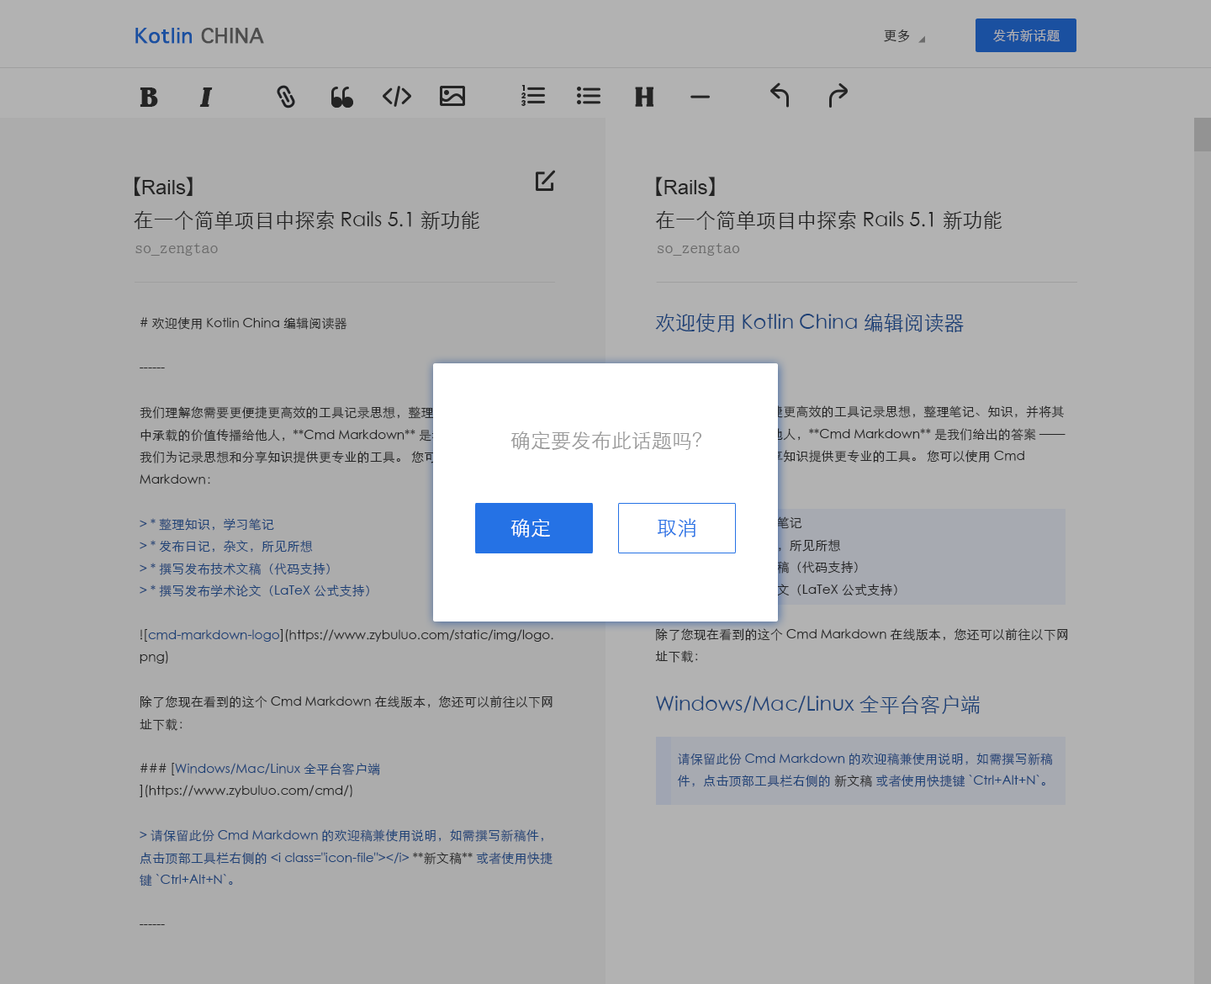
<style>
.page{position:relative;width:1211px;height:984px;background:#b2b2b2}
.page>*{position:absolute;margin:0}
.t1{font:20.2px "Geneva";font-weight:bold}
.t2{font:13.5px "STXihei";color:#333333}
.t3{font:13.5px "STXihei";color:#b2b2b2}
.t4{font:28.6px "BelweBT-Bold";color:#333333}
.t5{font:28.6px "BelweBT-Bold";color:#333333;font-style:italic}
.t6{font:7.6px "ITCAvantGardeStd-Bold";color:#333333}
.t7{font:20.2px "ArialMT";color:#333333}
.t8{font:20.2px "AdobeHeitiStd-Regular";color:#333333}
.t9{font:20.2px "STXihei";color:#333333}
.t10{font:16.8px "SimSun";color:#6b6b6b}
.t11{font:16.8px "STXihei";color:#6b6b6b}
.t12{font:12.7px "STXihei"}
.t13{font:20.2px "STXihei"}
.t14{font:20.2px "STXihei";color:#999999}
.t15{font:20.2px "STXihei";color:#ffffff}
.t16{font:20.2px "STXihei";color:#2572e5}
</style>
<div class="page">
<p class="t1" style="left:135px;top:28px;width:129px;height:16px">Kotlin CHINA</p>
<p class="t2" style="left:884px;top:29px;width:26px;height:13px">更多</p>
<p class="t3" style="left:994px;top:29px;width:67px;height:13px">发布新话题</p>
<p class="t4" style="left:140px;top:87px;width:18px;height:20px">B</p>
<p class="t5" style="left:199px;top:87px;width:14px;height:20px">I</p>
<p class="t6" style="left:522px;top:85px;width:3px;height:6px">1</p>
<p class="t6" style="left:522px;top:93px;width:4px;height:5px">2</p>
<p class="t6" style="left:522px;top:100px;width:4px;height:6px">3</p>
<p class="t7" style="left:135px;top:177px;width:58px;height:19px"><span class="t8">【</span>Rails<span class="t8">】</span></p>
<p class="t7" style="left:656px;top:177px;width:59px;height:19px"><span class="t8">【</span>Rails<span class="t8">】</span></p>
<p class="t9" style="left:134px;top:210px;width:346px;height:21px">在一个简单项目中探索 Rails 5.1 新功能</p>
<p class="t9" style="left:655px;top:210px;width:348px;height:21px">在一个简单项目中探索 Rails 5.1 新功能</p>
<p class="t10" style="left:135px;top:243px;width:83px;height:13px"><span class="t11"> </span>so_zengtao</p>
<p class="t10" style="left:658px;top:243px;width:82px;height:13px"><span class="t11"> </span>so_zengtao</p>
<p class="t12" style="left:140px;top:317px;width:414px;height:608px"># 欢迎使用 Kotlin China 编辑阅读器<br><br>------<br><br>我们理解您需要更便捷更高效的工具记录思想，整理笔记、知识，并将其中承载的价值传播给他人，**Cmd Markdown** 是我们给出的答案 —— 我们为记录思想和分享知识提供更专业的工具。 您可以使用 Cmd Markdown：<br><br>&gt; * 整理知识，学习笔记<br>&gt; * 发布日记，杂文，所见所想<br>&gt; * 撰写发布技术文稿（代码支持）<br>&gt; * 撰写发布学术论文（LaTeX 公式支持）<br><br>![cmd-markdown-logo](https://www.zybuluo.com/static/img/logo.png)<br><br>除了您现在看到的这个 Cmd Markdown 在线版本，您还可以前往以下网址下载：<br><br>### [Windows/Mac/Linux 全平台客户端](https://www.zybuluo.com/cmd/)<br><br>&gt; 请保留此份 Cmd Markdown 的欢迎稿兼使用说明，如需撰写新稿件，点击顶部工具栏右侧的 &lt;i class="icon-file"&gt;&lt;/i&gt; **新文稿** 或者使用快捷键 `Ctrl+Alt+N`。<br><br>------</p>
<p class="t12" style="left:655px;top:313px;width:413px;height:474px"><span class="t13">欢迎使用 Kotlin China 编辑阅读器<br><br></span><br>我们理解您需要更便捷更高效的工具记录思想，整理笔记、知识，并将其中承载的价值传播给他人，**Cmd Markdown** 是我们给出的答案 —— 我们为记录思想和分享知识提供更专业的工具。 您可以使用 Cmd Markdown：<br><br>      ·整理知识，学习笔记<br>      ·发布日记，杂文，所见所想<br>      ·撰写发布技术文稿（代码支持）<br>      ·撰写发布学术论文（LaTeX 公式支持）<br><br>除了您现在看到的这个 Cmd Markdown 在线版本，您还可以前往以下网址下载：<br><br><span class="t13">Windows/Mac/Linux 全平台客户端<br><br></span>       请保留此份 Cmd Markdown 的欢迎稿兼使用说明，如需撰写新稿<br>       件，点击顶部工具栏右侧的 新文稿 或者使用快捷键 `Ctrl+Alt+N`。</p>
<p class="t14" style="left:511px;top:431px;width:191px;height:19px">确定要发布此话题吗？</p>
<p class="t15" style="left:511px;top:518px;width:39px;height:20px">确定</p>
<p class="t16" style="left:658px;top:518px;width:39px;height:20px">取消</p>
</div>
